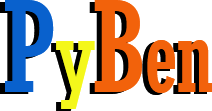
<style>
.page{position:relative;width:212px;height:111px;background:#ffffff}
.page>*{position:absolute;margin:0}
.t1{font:100px "Rockwell-Condensed"}
.t2{font:125px "Rockwell-Condensed"}
.t3{font:100px "Rockwell-Condensed";color:#f2620b}
.t4{font:125px "Rockwell-Condensed";color:#0961cd}
.t5{font:100px "Rockwell-Condensed";color:#f4f71b}
.t6{font:125px "Rockwell-Condensed";color:#f2620b}
</style>
<div class="page">
<p class="t1" style="left:0px;top:2px;width:207px;height:109px"><span class="t2">P</span>y<span class="t2">B</span>en</p>
<p class="t3" style="left:5px;top:0px;width:207px;height:109px"><span class="t4">P</span><span class="t5">y</span><span class="t6">B</span>en</p>
</div>
